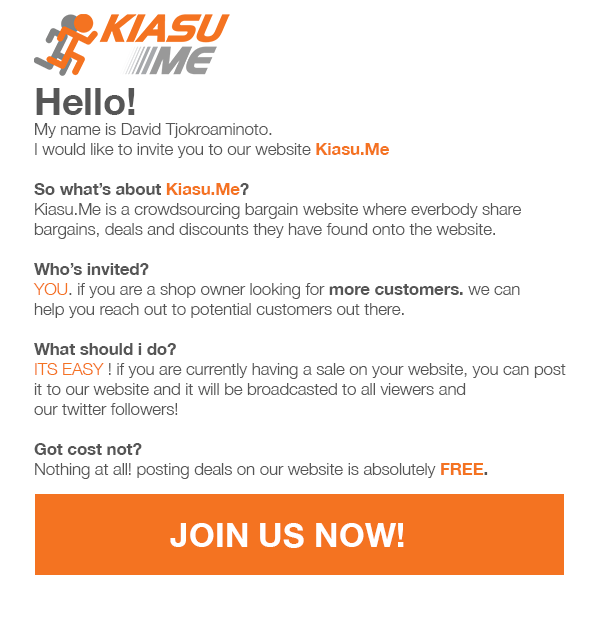
<style>
.page{position:relative;width:600px;height:620px;background:#ffffff}
.page>*{position:absolute;margin:0}
.t1{font:16.7px "HelveticaNeue-Light";color:#565656}
.t2{font:37.5px "HelveticaNeue-Bold";color:#565656}
.t3{font:16.7px "HelveticaNeue-Bold";color:#f47321}
.t4{font:16.7px "HelveticaNeue-Bold";color:#565656}
.t5{font:16.7px "HelveticaNeue-Light";color:#f47321}
.t6{font:33.3px "HelveticaNeue-Bold";color:#ffffff}
</style>
<div class="page">
<p class="t1" style="left:33px;top:88px;width:533px;height:391px"><span class="t2">Hello!<br></span>My name is David Tjokroaminoto.<br>I would like to invite you to our website <span class="t3">Kiasu.Me<br><br></span><span class="t4">So what’s about </span><span class="t3">Kiasu.Me</span><span class="t4">?<br></span>Kiasu.Me is a crowdsourcing bargain website where everbody share <br>bargains, deals and discounts they have found onto the website.<br><br><span class="t4">Who’s invited?<br></span><span class="t5">YOU</span>. if you are a shop owner looking for <span class="t4">more customers. </span>we can<br>help you reach out to potential customers out there.<br><br><span class="t4">What should i do?<br></span><span class="t5">ITS EASY</span> ! if you are currently having a sale on your website, you can post<br>it to our website and it will be broadcasted to all viewers and <br>our twitter followers!<br><br><span class="t4">Got cost not?<br></span>Nothing at all! posting deals on our website is absolutely <span class="t3">FREE</span><span class="t4">.</span></p>
<p class="t6" style="left:170px;top:523px;width:234px;height:25px">JOIN US NOW!</p>
</div>
